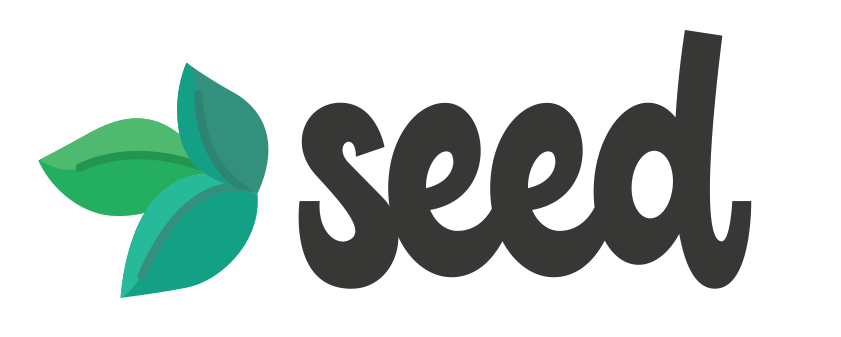
<style>
.page{position:relative;width:841px;height:337px;background:#ffffff}
.page>*{position:absolute;margin:0}
.t1{font:338.5px "ChildishFreeRegular";letter-spacing:-0.01em;color:#333433}
.t2{font:338.5px "ChildishFreeRegular";letter-spacing:-0.075em;color:#333433}
</style>
<div class="page">
<p class="t1" style="left:298px;top:30px;width:454px;height:259px"><span class="t2">s</span>eed</p>
</div>
